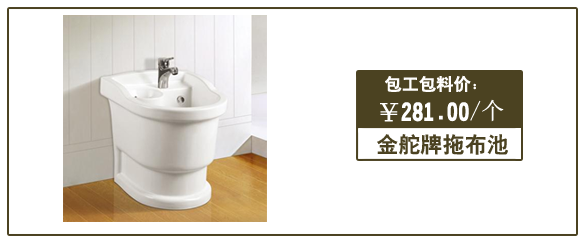
<style>
.page{position:relative;width:585px;height:240px;background:#ffffff}
.page>*{position:absolute;margin:0}
.t1{font:17.2px "HeitiCSEG";color:#fffefe}
.t2{font:23px "HeitiCSEG";color:#ffffff}
.t3{font:23px "SimSun";color:#ffffff}
.t4{font:22.1px "HeitiCSEG";color:#4b4221}
</style>
<div class="page">
<p class="t1" style="left:385px;top:75px;width:91px;height:17px">包工包料价：</p>
<p class="t2" style="left:380px;top:99px;width:124px;height:23px">￥281.00<span class="t3">/个</span></p>
<p class="t4" style="left:377px;top:134px;width:131px;height:21px">金舵牌拖布池</p>
</div>
